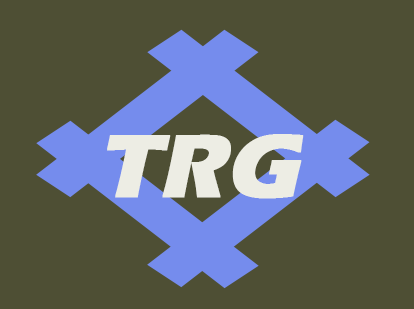
<style>
.page{position:relative;width:414px;height:309px;background:#4e4f34}
.page>*{position:absolute;margin:0}
.t1{font:91.7px "ErasITC-Bold";color:#edede4;font-weight:bold;font-style:italic}
</style>
<div class="page">
<p class="t1" style="left:107px;top:134px;width:197px;height:65px">TRG</p>
</div>
